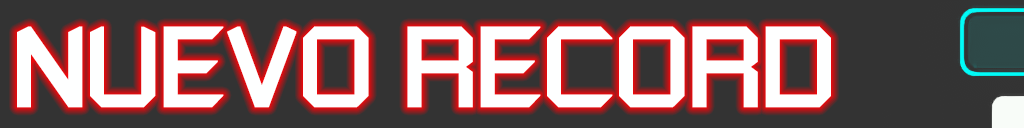
<style>
.page{position:relative;width:1024px;height:128px;background:#333333}
.page>*{position:absolute;margin:0}
.t1{font:90.7px "RussellSquare";letter-spacing:-0.02em;color:#feffff;font-weight:bold}
</style>
<div class="page">
<p class="t1" style="left:17px;top:26px;width:814px;height:82px">NUEVO RECORD</p>
</div>
